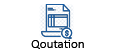
<style>
.page{position:relative;width:114px;height:50px;background:#ffffff}
.page>*{position:absolute;margin:0}
.t1{font:12.6px "Calibri";color:#000000;scale:1.03 1}
</style>
<div class="page">
<p class="t1" style="left:31px;top:39px;width:53px;height:10px">Qoutation</p>
</div>
